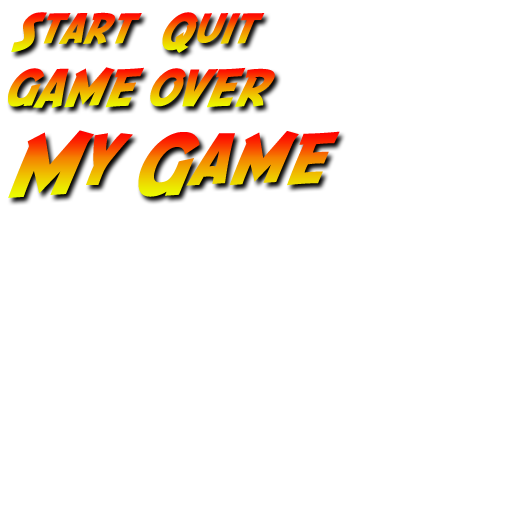
<style>
.page{position:relative;width:512px;height:512px;background:#ffffff}
.page>*{position:absolute;margin:0}
.t1{font:42.5px "SFFedora";letter-spacing:-0.01em;font-weight:bold}
.t2{font:72.2px "SFFedora";letter-spacing:-0.01em;font-weight:bold}
</style>
<div class="page">
<p class="t1" style="left:11px;top:12px;width:131px;height:40px">Start</p>
<p class="t1" style="left:162px;top:12px;width:103px;height:41px">Quit</p>
<p class="t1" style="left:8px;top:67px;width:267px;height:41px">GAME OVER</p>
<p class="t2" style="left:8px;top:130px;width:332px;height:68px">My Game</p>
</div>
